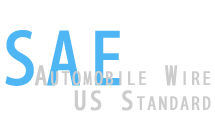
<style>
.page{position:relative;width:215px;height:123px;background:#ffffff}
.page>*{position:absolute;margin:0}
.t1{font:70px "AdobeFanHeitiStd-Bold";letter-spacing:0.1em;color:#4eb6f5;font-weight:bold}
.t2{font:25px/25px "AdobeFanHeitiStd-Bold";letter-spacing:0.1em;color:#cccccc;font-variant:small-caps;font-weight:bold}
</style>
<div class="page">
<p class="t1" style="left:5px;top:30px;width:116px;height:56px">SAE</p>
<p class="t2" style="left:34px;top:65px;width:177px;height:46px;text-align:right">Automobile Wire<br>US Standard</p>
</div>
